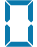
<style>
.page{position:relative;width:37px;height:47px;background:#ffffff}
.page>*{position:absolute;margin:0}
.t1{font:73.3px "DS-Digital";color:#0a79ac;text-transform:uppercase}
</style>
<div class="page">
<p class="t1" style="left:5px;top:0px;width:28px;height:47px">0</p>
</div>
